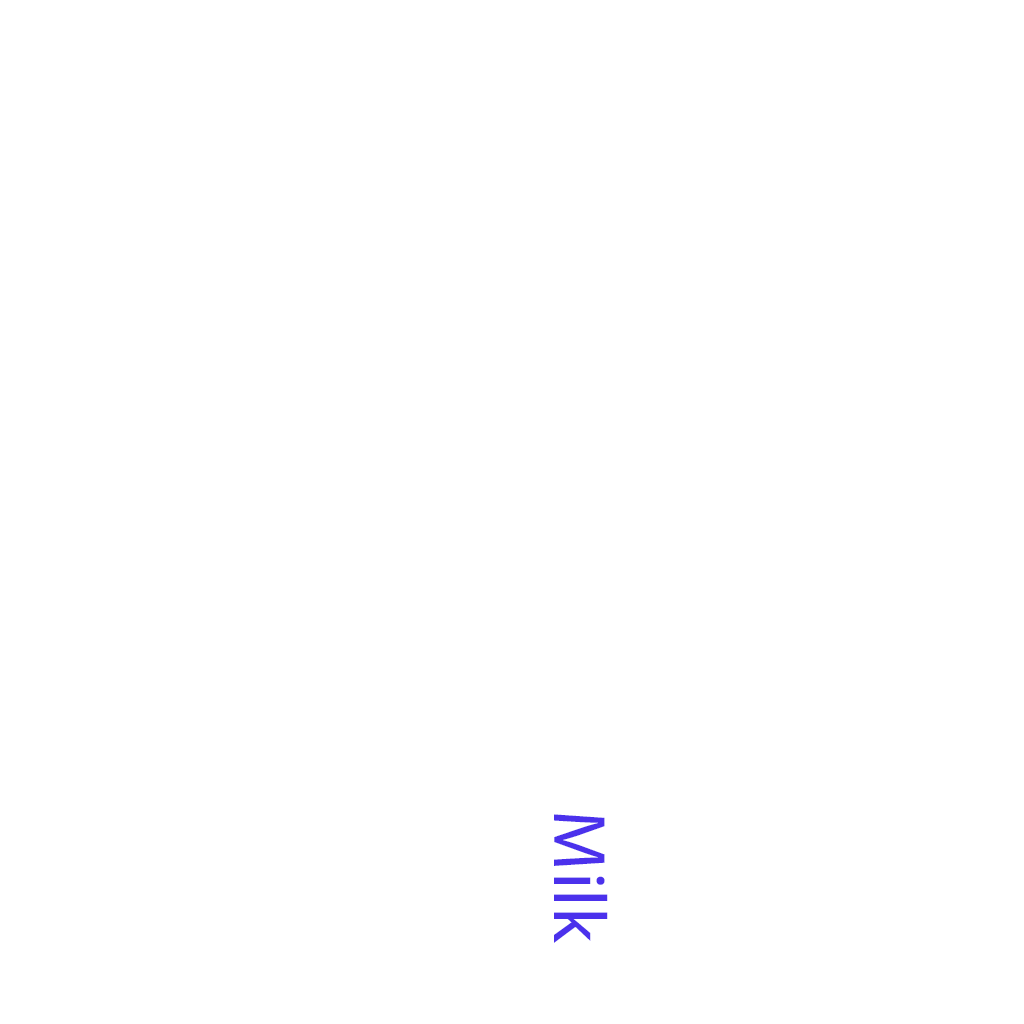
<style>
.page{position:relative;width:1024px;height:1024px;background:#ffffff}
.page>*{position:absolute;margin:0}
.t1{font:75px "MyriadPro-Regular";color:#4b31ec}
</style>
<div class="page">
<p class="t1" style="left:554px;top:814px;width:54px;height:129px;rotate:90deg">Milk</p>
</div>
